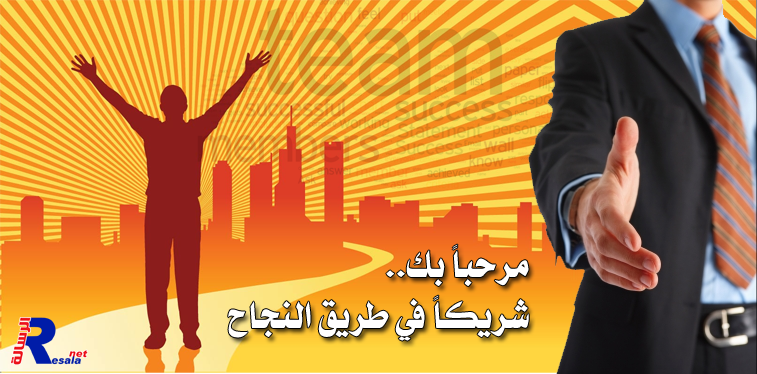
<style>
.page{position:relative;width:757px;height:374px}
.page>*{position:absolute;margin:0}
.t1{font:42.5px "Sultan-bold";color:#ffffff}
</style>
<div class="page">
<p class="t1" style="left:228px;top:244px;width:301px;height:97px">مرحباً بك..<br>شريكاً في طريق النجاح</p>
</div>
